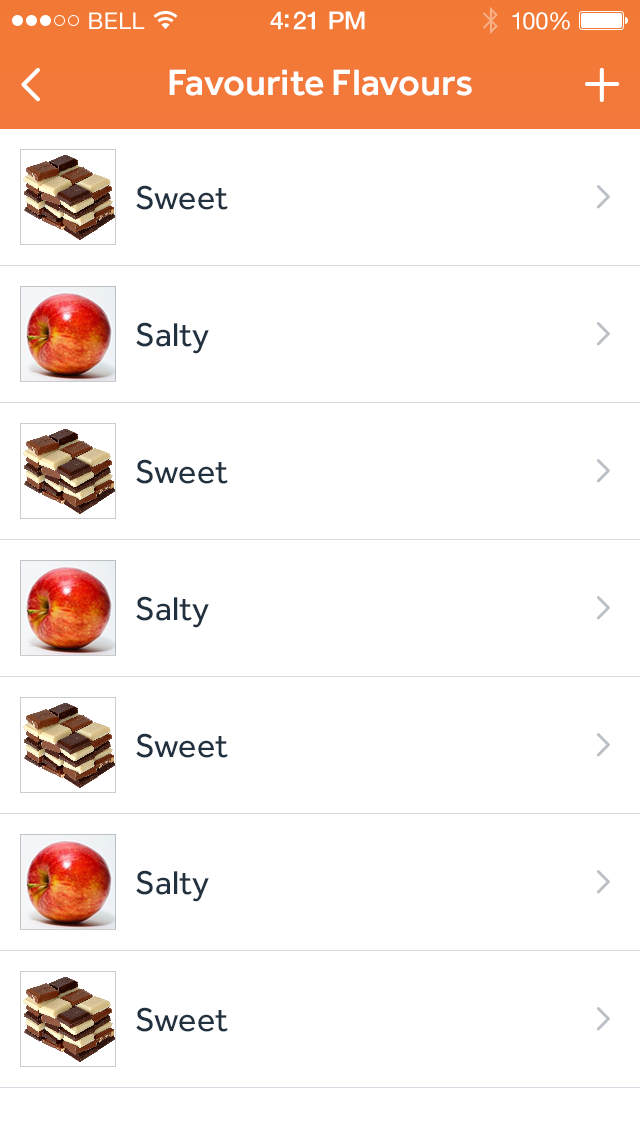
<style>
.page{position:relative;width:640px;height:1136px;background:#ffffff}
.page>*{position:absolute;margin:0}
.t1{font:23px "HelveticaNeue";letter-spacing:0.02em;color:#ffffff}
.t2{font:25px "HelveticaNeue-Medium";letter-spacing:-0.02em;color:#ffffff}
.t3{font:24px "HelveticaNeue";letter-spacing:-0.02em;color:#ffffff}
.t4{font:38px "Effra-Medium";color:#ffffff}
.t5{font:34px "Effra-Regular";color:#22313f}
</style>
<div class="page">
<p class="t1" style="left:89px;top:12px;width:56px;height:17px">BELL</p>
<p class="t2" style="left:270px;top:11px;width:95px;height:19px">4:21 PM</p>
<p class="t3" style="left:512px;top:12px;width:58px;height:18px">100%</p>
<p class="t4" style="left:169px;top:69px;width:303px;height:27px">Favourite Flavours</p>
<p class="t5" style="left:136px;top:185px;width:92px;height:25px">Sweet</p>
<p class="t5" style="left:136px;top:322px;width:73px;height:32px">Salty</p>
<p class="t5" style="left:136px;top:459px;width:92px;height:25px">Sweet</p>
<p class="t5" style="left:136px;top:596px;width:73px;height:32px">Salty</p>
<p class="t5" style="left:136px;top:733px;width:92px;height:25px">Sweet</p>
<p class="t5" style="left:136px;top:870px;width:73px;height:32px">Salty</p>
<p class="t5" style="left:136px;top:1007px;width:92px;height:25px">Sweet</p>
</div>
